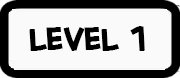
<style>
.page{position:relative;width:180px;height:78px;background:#fafafa}
.page>*{position:absolute;margin:0}
.t1{font:33px "CreativeBlockBBBold";letter-spacing:-0.045em;color:#000000}
</style>
<div class="page">
<p class="t1" style="left:29px;top:26px;width:116px;height:25px">level 1</p>
</div>
